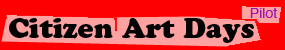
<style>
.page{position:relative;width:285px;height:50px;background:#fd0000}
.page>*{position:absolute;margin:0}
.t1{font:14px "Helvetica";color:#9716b3}
.t2{font:28px "CooperBlackStd";color:#040404}
</style>
<div class="page">
<p class="t1" style="left:250px;top:8px;width:27px;height:10px">Pilot</p>
<p class="t2" style="left:9px;top:18px;width:245px;height:25px">Citizen Art Days</p>
</div>
